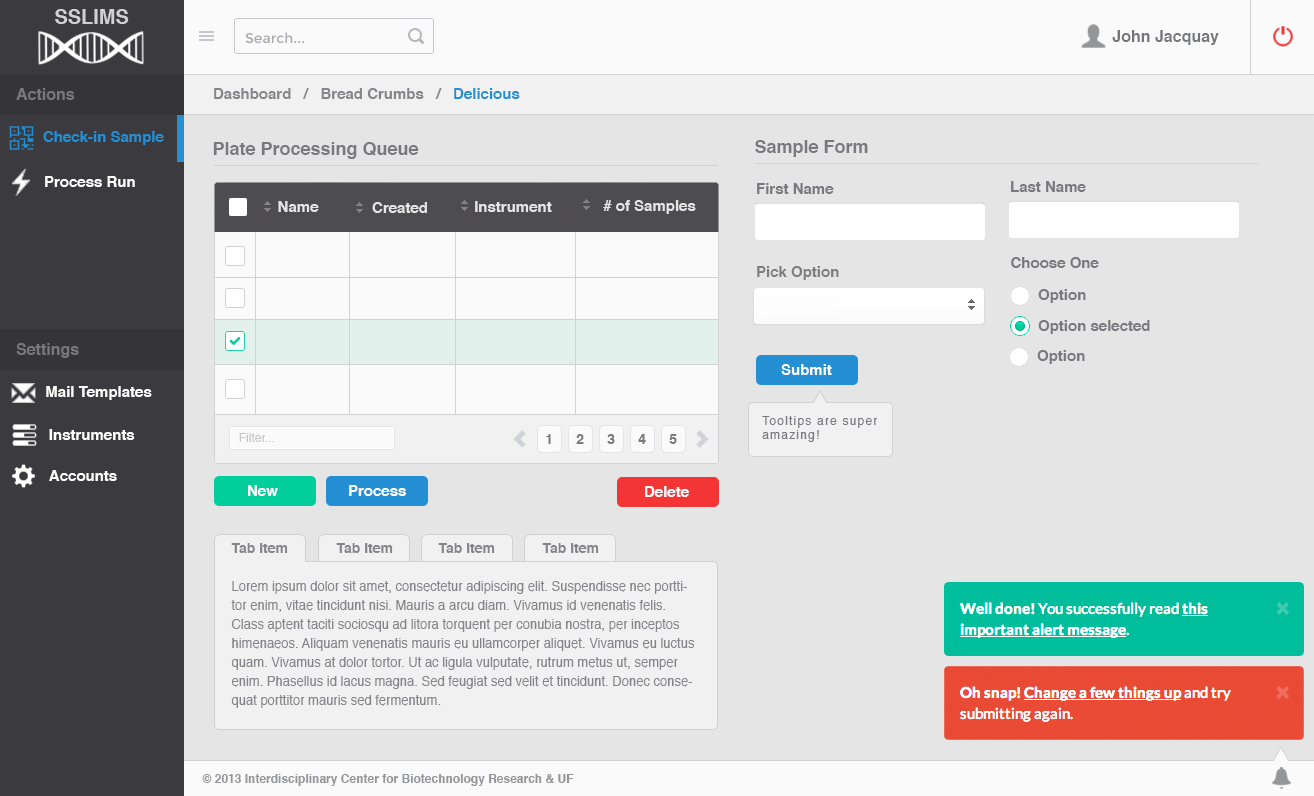
<style>
.page{position:relative;width:1314px;height:796px;background:#e5e5e5}
.page>*{position:absolute;margin:0}
.t1{font:20px "Helvetica-Bold";color:#d1d1d4}
.t2{font:16px "Helvetica-Bold";color:#757679}
.t3{font:16px "Helvetica-Bold";color:#79797d}
.t4{font:15px "Helvetica-Bold";color:#858589}
.t5{font:15px "Helvetica-Bold";color:#248fd3}
.t6{font:18px "Helvetica-Bold";color:#79797d}
.t7{font:15px "Helvetica-Bold";color:#ffffff}
.t8{font:15px "Helvetica-Bold";color:#79797d}
.t9{font:15px "Helvetica-Bold";color:#e5e6e6}
.t10{font:15px "Helvetica-Bold";color:#7e7e81}
.t11{font:12px/37px "Helvetica";letter-spacing:0.1em;color:#79797d}
.t12{font:12px "Helvetica";letter-spacing:0.1em;color:#79797d}
.t13{font:12px "Helvetica";color:#c6c6ca}
.t14{font:14px "Helvetica-Bold";color:#79797d}
.t15{font:14px "Helvetica-Bold";color:#858589}
.t16{font:13px/19px "Helvetica";color:#858589}
.t17{font:12px "Helvetica-Bold";color:#959698}
</style>
<div class="page">
<p class="t1" style="left:55px;top:9px;width:74px;height:15px">SSLIMS</p>
<p class="t2" style="left:1112px;top:30px;width:107px;height:15px">John Jacquay</p>
<p class="t3" style="left:16px;top:88px;width:59px;height:12px">Actions</p>
<p class="t4" style="left:214px;top:88px;width:306px;height:11px">Dashboard   /   Bread Crumbs   /   <span class="t5">Delicious</span></p>
<p class="t5" style="left:43px;top:131px;width:121px;height:14px">Check-in Sample</p>
<p class="t6" style="left:213px;top:142px;width:206px;height:17px">Plate Processing Queue</p>
<p class="t6" style="left:755px;top:140px;width:113px;height:17px">Sample Form</p>
<p class="t7" style="left:45px;top:176px;width:90px;height:11px">Process Run</p>
<p class="t8" style="left:757px;top:183px;width:77px;height:11px">First Name</p>
<p class="t8" style="left:1011px;top:181px;width:75px;height:11px">Last Name</p>
<p class="t9" style="left:278px;top:201px;width:41px;height:11px">Name</p>
<p class="t9" style="left:372px;top:202px;width:55px;height:11px">Created</p>
<p class="t9" style="left:475px;top:201px;width:77px;height:11px">Instrument</p>
<p class="t9" style="left:603px;top:200px;width:93px;height:14px"># of Samples</p>
<p class="t8" style="left:1011px;top:257px;width:88px;height:11px">Choose One</p>
<p class="t10" style="left:757px;top:266px;width:82px;height:14px">Pick Option</p>
<p class="t8" style="left:1038px;top:289px;width:48px;height:14px">Option</p>
<p class="t8" style="left:1038px;top:320px;width:112px;height:14px">Option selected</p>
<p class="t3" style="left:16px;top:343px;width:63px;height:15px">Settings</p>
<p class="t8" style="left:1037px;top:350px;width:48px;height:14px">Option</p>
<p class="t7" style="left:781px;top:364px;width:51px;height:11px">Submit</p>
<p class="t7" style="left:46px;top:386px;width:106px;height:14px">Mail Templates</p>
<p class="t11" style="left:762px;top:416px;width:115px;height:26px">Tooltips are super <span class="t12"><br>amazing!</span></p>
<p class="t7" style="left:49px;top:429px;width:86px;height:11px">Instruments</p>
<p class="t13" style="left:239px;top:433px;width:35px;height:9px">Filter...</p>
<p class="t14" style="left:546px;top:434px;width:5px;height:10px">1</p>
<p class="t14" style="left:576px;top:434px;width:8px;height:10px">2</p>
<p class="t14" style="left:607px;top:434px;width:8px;height:10px">3</p>
<p class="t14" style="left:638px;top:434px;width:8px;height:10px">4</p>
<p class="t14" style="left:669px;top:434px;width:8px;height:10px">5</p>
<p class="t7" style="left:49px;top:470px;width:68px;height:11px">Accounts</p>
<p class="t7" style="left:248px;top:485px;width:30px;height:11px">New</p>
<p class="t7" style="left:349px;top:485px;width:57px;height:11px">Process</p>
<p class="t7" style="left:645px;top:486px;width:44px;height:11px">Delete</p>
<p class="t15" style="left:231px;top:543px;width:57px;height:10px">Tab Item</p>
<p class="t15" style="left:336px;top:543px;width:57px;height:10px">Tab Item</p>
<p class="t15" style="left:438px;top:543px;width:57px;height:10px">Tab Item</p>
<p class="t15" style="left:542px;top:543px;width:57px;height:10px">Tab Item</p>
<p class="t16" style="left:231px;top:581px;width:463px;height:127px">Lorem ipsum dolor sit amet, consectetur adipiscing elit. Suspendisse nec porttitor enim, vitae tincidunt nisi. Mauris a arcu diam. Vivamus id venenatis felis. Class aptent taciti sociosqu ad litora torquent per conubia nostra, per inceptos himenaeos. Aliquam venenatis mauris eu ullamcorper aliquet. Vivamus eu luctus quam. Vivamus at dolor tortor. Ut ac ligula vulputate, rutrum metus ut, semper enim. Phasellus id lacus magna. Sed feugiat sed velit et tincidunt. Donec consequat porttitor mauris sed fermentum.</p>
<p class="t17" style="left:202px;top:774px;width:372px;height:12px">© 2013 Interdisciplinary Center for Biotechnology Research &amp; UF</p>
</div>
